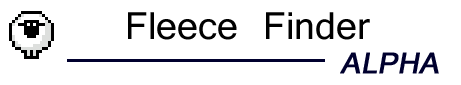
<style>
.page{position:relative;width:461px;height:85px;background:#ffffff}
.page>*{position:absolute;margin:0}
.t1{font:41.8px "Vrinda";color:#000000}
.t2{font:31.9px "Vrinda";color:#00002e;font-weight:bold;font-style:italic}
</style>
<div class="page">
<p class="t1" style="left:128px;top:12px;width:242px;height:28px">Fleece Finder</p>
<p class="t2" style="left:340px;top:52px;width:99px;height:22px">ALPHA</p>
</div>
